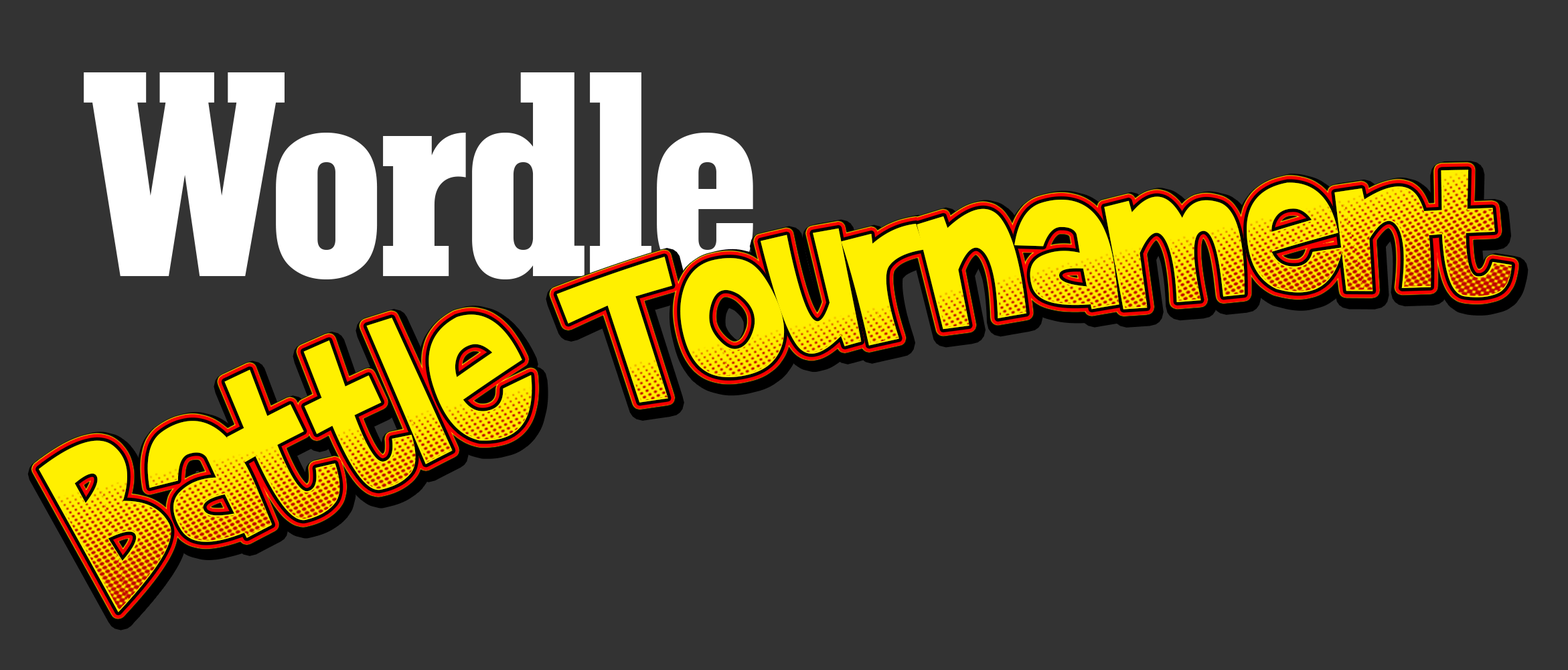
<style>
.page{position:relative;width:1568px;height:670px;background:#333333}
.page>*{position:absolute;margin:0}
.t1{font:279px "KarnakPro-CondensedBlack";color:#ffffff}
.t2{font:200.9px "BradyBunchRemastered";letter-spacing:-0.02em;color:#fff000}
</style>
<div class="page">
<p class="t1" style="left:84px;top:72px;width:669px;height:207px">Wordle</p>
<p class="t2" style="left:38px;top:169px;width:1474px;height:443px">Battle Tournament</p>
</div>
